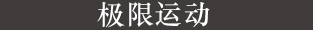
<style>
.page{position:relative;width:313px;height:30px;background:#3f3b3a}
.page>*{position:absolute;margin:0}
.t1{font:27.3px "STZhongsong";letter-spacing:0.05em;color:#ffffff}
</style>
<div class="page">
<p class="t1" style="left:97px;top:1px;width:113px;height:27px">极限运动</p>
</div>
